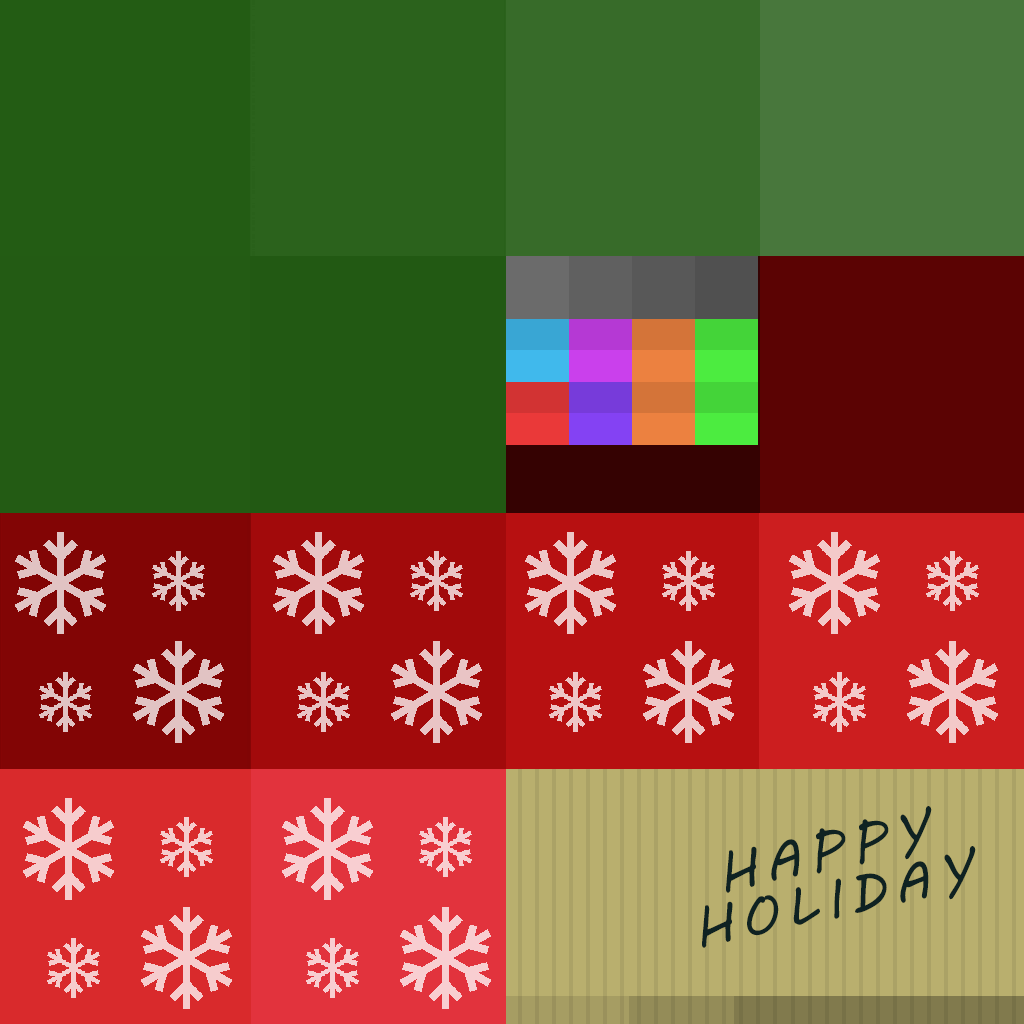
<style>
.page{position:relative;width:1024px;height:1024px}
.page>*{position:absolute;margin:0}
.t1{font:52.7px/48.3px "MVBoli";letter-spacing:0.165em;color:#0f2222;text-transform:uppercase}
</style>
<div class="page">
<p class="t1" style="left:702px;top:806px;width:274px;height:142px;text-align:center;rotate:-12deg">Happy<br>Holiday</p>
</div>
